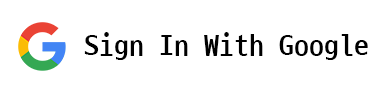
<style>
.page{position:relative;width:382px;height:92px;background:#ffffff}
.page>*{position:absolute;margin:0}
.t1{font:30px "D2CodingBold";color:#000000}
</style>
<div class="page">
<p class="t1" style="left:84px;top:32px;width:284px;height:28px">Sign In With Google</p>
</div>
